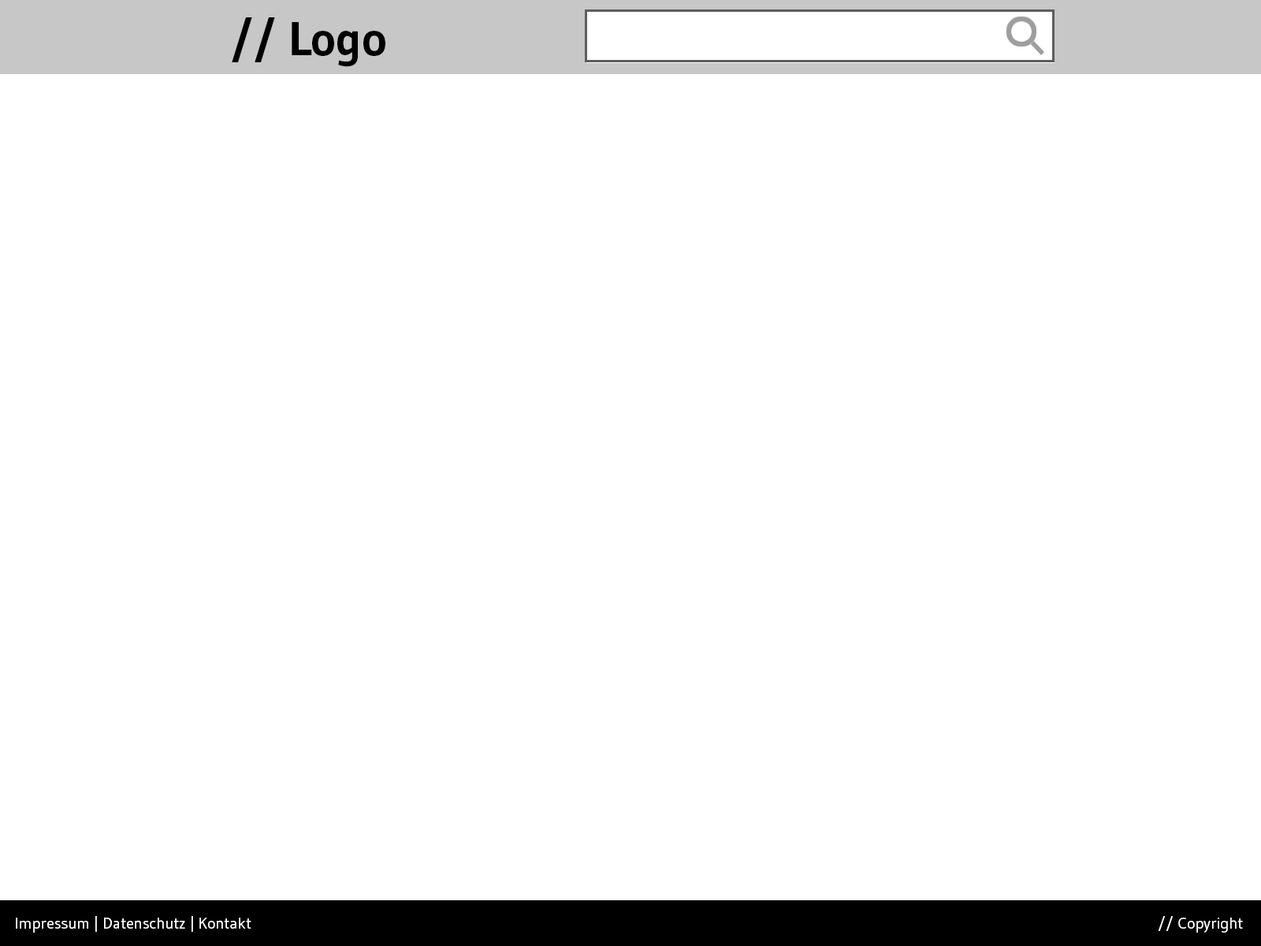
<style>
.page{position:relative;width:1261px;height:946px;background:#ffffff}
.page>*{position:absolute;margin:0}
.t1{font:47.3px "Gudea-Bold";color:#000000}
.t2{font:15.8px "Gudea";color:#ffffff}
</style>
<div class="page">
<p class="t1" style="left:232px;top:17px;width:153px;height:50px">// Logo</p>
<p class="t2" style="left:16px;top:916px;width:235px;height:16px">Impressum | Datenschutz | Kontakt</p>
<p class="t2" style="left:1158px;top:916px;width:85px;height:16px">// Copyright</p>
</div>
